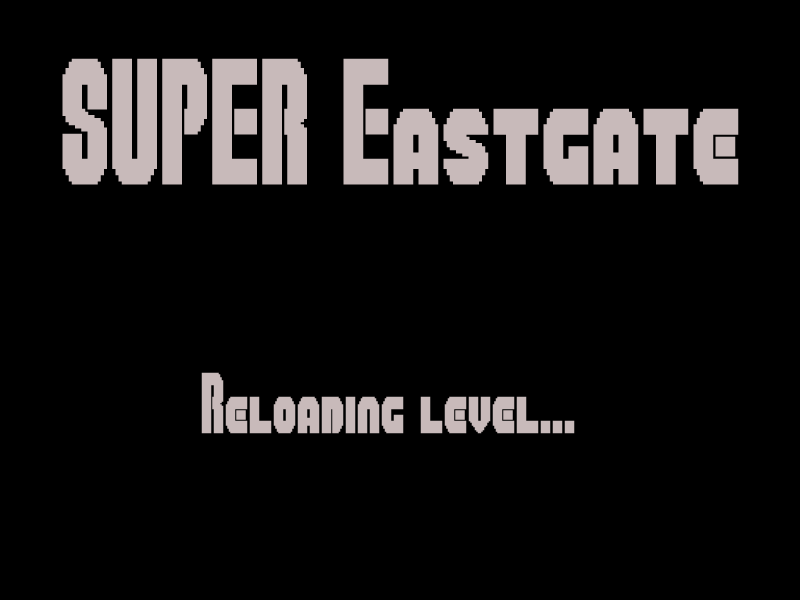
<style>
.page{position:relative;width:800px;height:600px;background:#000000}
.page>*{position:absolute;margin:0}
.t1{font:125px "SuperPlumberBrothers";color:#c8baba}
.t2{font:60px "SuperPlumberBrothers";color:#c8baba}
</style>
<div class="page">
<p class="t1" style="left:62px;top:58px;width:677px;height:127px">SUPER Eastgate</p>
<p class="t2" style="left:201px;top:372px;width:374px;height:62px">Reloading level...</p>
</div>
